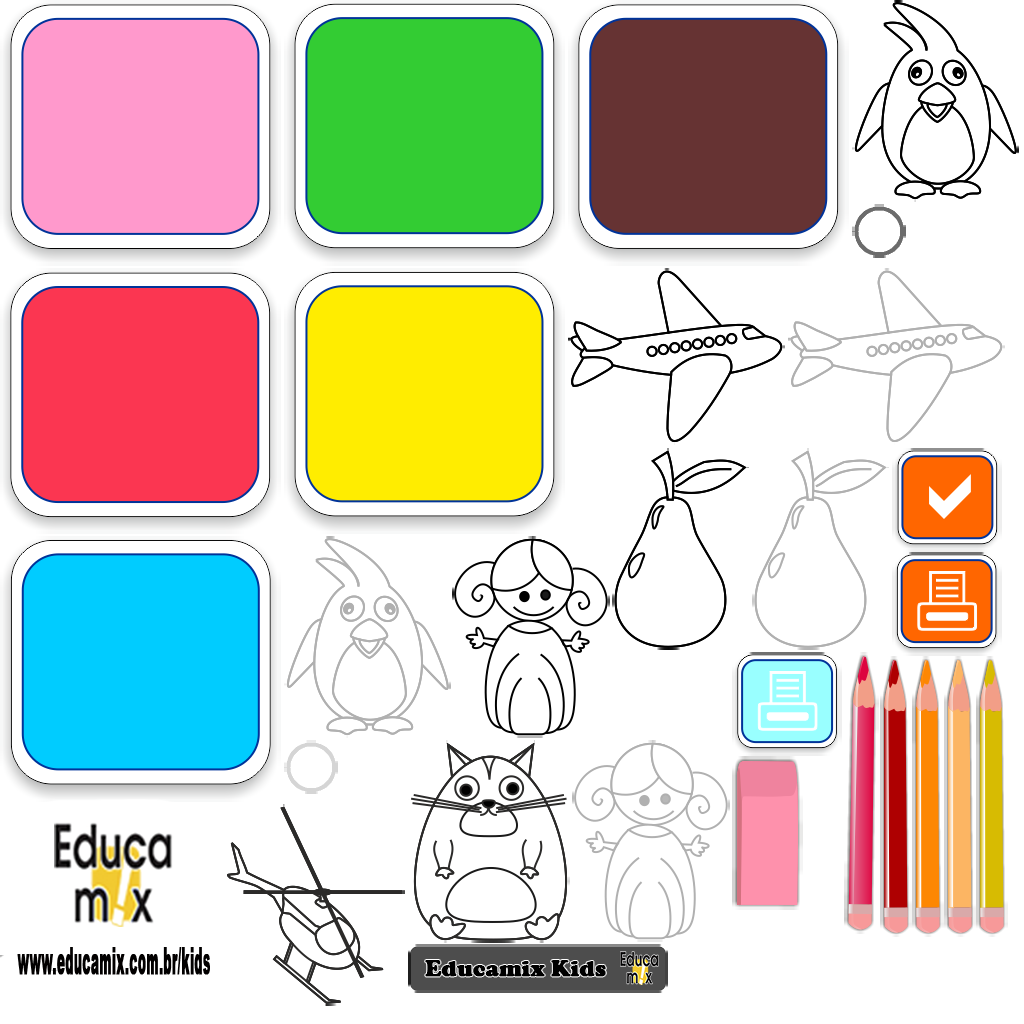
<style>
.page{position:relative;width:1024px;height:1024px;background:#ffffff}
.page>*{position:absolute;margin:0}
.t1{font:28.1px "Arial-Black";color:#020000;font-weight:bold;scale:0.33 1}
.t2{font:22.8px "CooperBlack";color:#000000;font-weight:bold}
</style>
<div class="page">
<p class="t1" style="left:17px;top:947px;width:193px;height:28px">www.educamix.com.br/kids</p>
<p class="t2" style="left:425px;top:960px;width:181px;height:17px">Educamix Kids</p>
</div>
